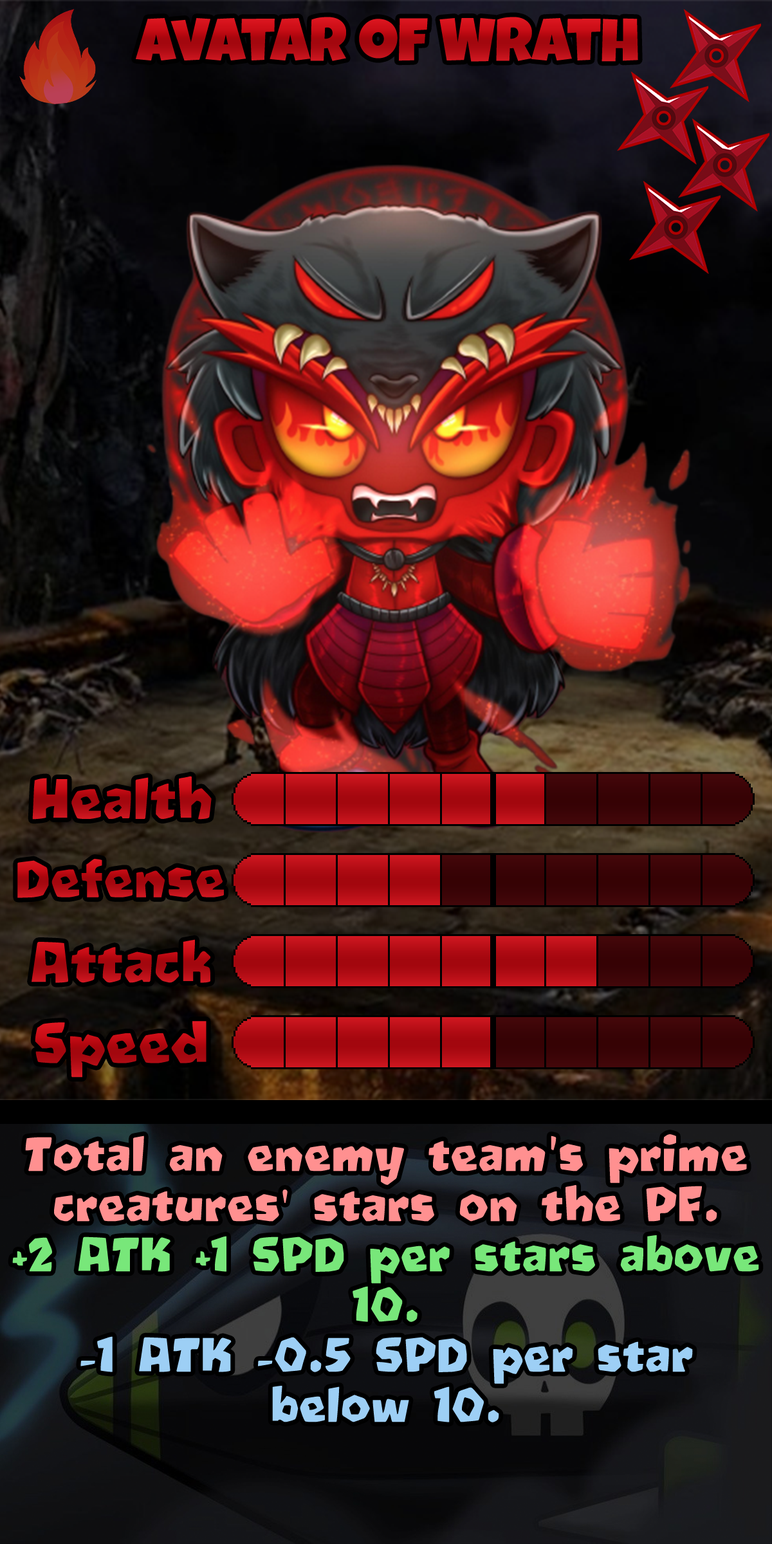
<style>
.page{position:relative;width:772px;height:1544px}
.page>*{position:absolute;margin:0}
.t1{font:105.5px "LuckiestGuy-Regular"}
.t2{font:92.7px "Oetztype";color:#b50a13}
.t3{font:86.2px "Oetztype";color:#b50a13}
.t4{font:92.7px "Oetztype";color:#b40b13}
.t5{font:92.7px "Oetztype";color:#ae0911}
.t6{font:78.5px/50.2px "Oetztype";color:#ff9090}
.t7{font:78.5px/50.2px "Century";color:#ff9090}
.t8{font:78.5px/50.2px "Oetztype";color:#78e77a}
.t9{font:78.5px/50.2px "Oetztype";color:#9dcff5}
</style>
<div class="page">
<p class="t1" style="left:136px;top:17px;width:502px;height:45px">Avatar of Wrath</p>
<p class="t2" style="left:32px;top:776px;width:180px;height:44px">Health</p>
<p class="t3" style="left:17px;top:859px;width:207px;height:39px">Defense</p>
<p class="t4" style="left:32px;top:939px;width:178px;height:44px">Attack</p>
<p class="t5" style="left:35px;top:1021px;width:172px;height:57px">Speed</p>
<p class="t6" style="left:12px;top:1134px;width:747px;height:289px;text-align:center">Total an enemy team's prime creatures<span class="t7">'</span> stars on the PF.<br><span class="t8">+2 ATK +1 SPD per stars above 10.<br></span><span class="t9">-1 ATK -0.5 SPD per star below 10.</span></p>
</div>
